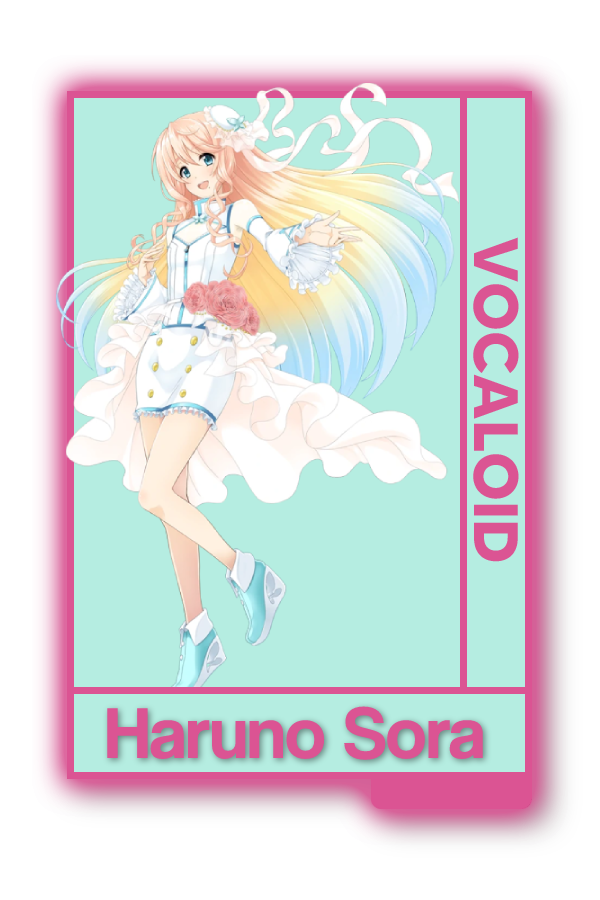
<style>
.page{position:relative;width:600px;height:900px;background:#b5ede1}
.page>*{position:absolute;margin:0}
.t1{font:62.5px "MADETOMMY-Bold";color:#db5493}
.t2{font:75px "CoolveticaRg-Regular";color:#db5493}
</style>
<div class="page">
<p class="t1" style="left:473px;top:237px;width:46px;height:325px;rotate:90deg">VOCALOID</p>
<p class="t2" style="left:107px;top:706px;width:376px;height:54px">Haruno Sora</p>
</div>
